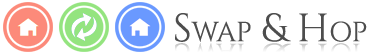
<style>
.page{position:relative;width:370px;height:54px;background:#ffffff}
.page>*{position:absolute;margin:0}
.t1{font:39.4px "Cinzel-Regular";color:#4d4d4d;font-variant:small-caps}
</style>
<div class="page">
<p class="t1" style="left:175px;top:13px;width:192px;height:29px">Swap &amp; Hop</p>
</div>
